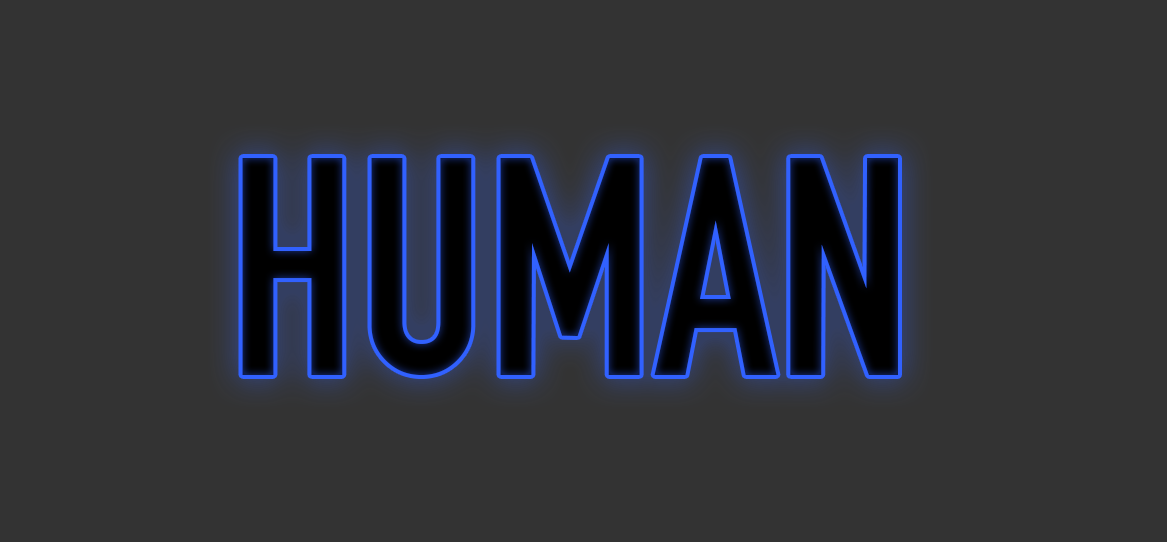
<style>
.page{position:relative;width:1167px;height:542px;background:#333333}
.page>*{position:absolute;margin:0}
.t1{font:302.5px "DINEngschrift";color:#010103}
</style>
<div class="page">
<p class="t1" style="left:242px;top:158px;width:656px;height:217px">HUMAN</p>
</div>
